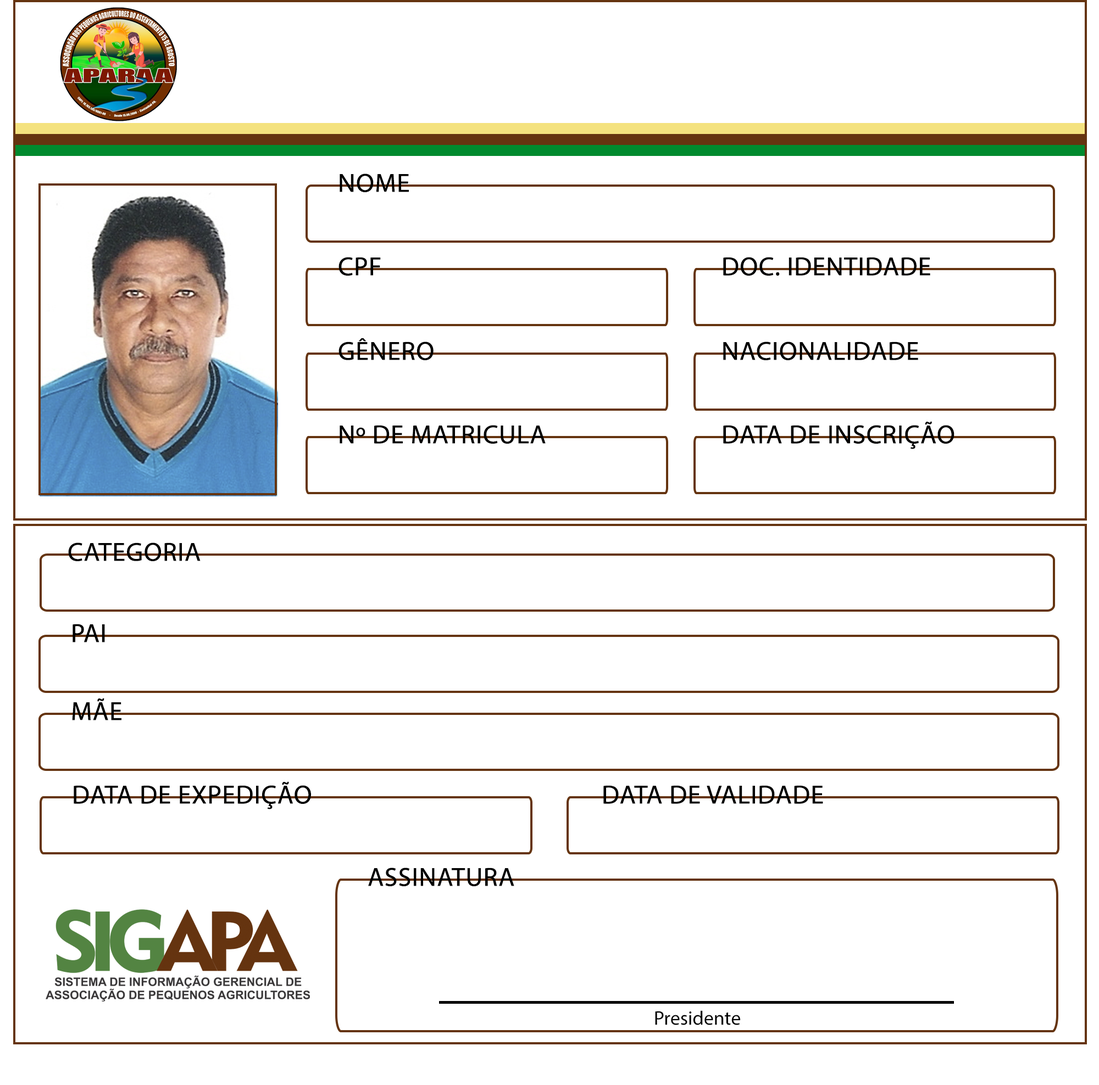
<style>
.page{position:relative;width:1099px;height:1085px;background:#ffffff}
.page>*{position:absolute;margin:0}
.t1{font:26.4px "MyriadPro-Regular";color:#000000;text-transform:uppercase;font-weight:bold}
.t2{font:26.4px "MyriadPro-Regular";color:#000000;font-weight:bold}
.t3{font:19.8px "MyriadPro-Regular";color:#000000}
</style>
<div class="page">
<p class="t1" style="left:339px;top:174px;width:70px;height:18px">Nome</p>
<p class="t2" style="left:338px;top:257px;width:43px;height:19px">CPF</p>
<p class="t2" style="left:723px;top:257px;width:207px;height:19px">DOC. IDENTIDADE</p>
<p class="t2" style="left:338px;top:338px;width:95px;height:22px">GÊNERO</p>
<p class="t1" style="left:723px;top:342px;width:195px;height:18px">NACIONALIDADE</p>
<p class="t2" style="left:339px;top:425px;width:206px;height:19px">Nº DE MATRICULA</p>
<p class="t1" style="left:723px;top:421px;width:231px;height:28px">Data de Inscrição</p>
<p class="t1" style="left:68px;top:543px;width:132px;height:18px">Categoria</p>
<p class="t1" style="left:73px;top:624px;width:32px;height:19px">PAI</p>
<p class="t1" style="left:72px;top:698px;width:49px;height:23px">mÃE</p>
<p class="t2" style="left:74px;top:782px;width:237px;height:28px">DATA DE EXPEDIÇÃO</p>
<p class="t1" style="left:603px;top:785px;width:220px;height:19px">data de validade</p>
<p class="t1" style="left:368px;top:868px;width:146px;height:19px">Assinatura</p>
<p class="t3" style="left:655px;top:1011px;width:85px;height:15px"><span class="t2"><br></span>Presidente</p>
</div>
